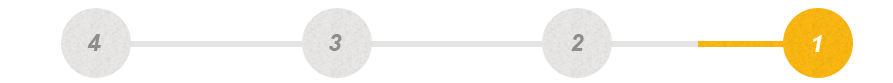
<style>
.page{position:relative;width:893px;height:83px;background:#ffffff}
.page>*{position:absolute;margin:0}
.t1{font:24px "Arial-BoldItalicMT";color:#8d8d8d}
.t2{font:24px "Arial-BoldItalicMT";color:#ffffff}
</style>
<div class="page">
<p class="t1" style="left:87px;top:34px;width:14px;height:17px">4</p>
<p class="t1" style="left:329px;top:34px;width:13px;height:17px">3</p>
<p class="t1" style="left:571px;top:34px;width:13px;height:17px">2</p>
<p class="t2" style="left:812px;top:35px;width:10px;height:17px">1</p>
</div>
